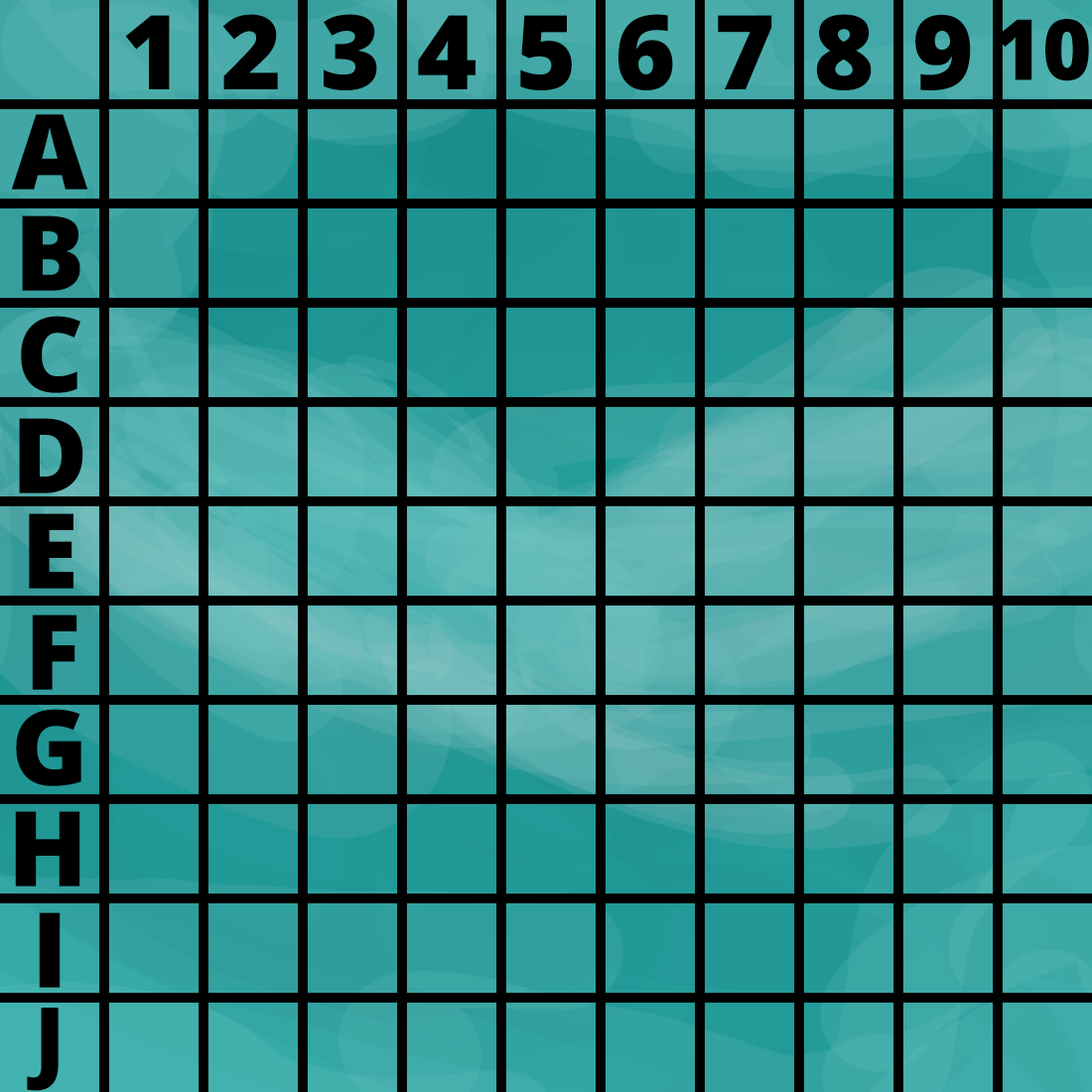
<style>
.page{position:relative;width:1092px;height:1092px}
.page>*{position:absolute;margin:0}
.t1{font:103.2px "OpenSans-ExtraBold";color:#000000}
.t2{font:84.4px "OpenSans-ExtraBold";color:#000000}
.t3{font:104.2px "OpenSans-ExtraBold";color:#000000}
.t4{font:88.4px "OpenSans-ExtraBold";color:#000000}
</style>
<div class="page">
<p class="t1" style="left:125px;top:15px;width:45px;height:74px">1</p>
<p class="t1" style="left:222px;top:14px;width:56px;height:75px">2</p>
<p class="t1" style="left:324px;top:14px;width:53px;height:76px">3</p>
<p class="t1" style="left:418px;top:15px;width:58px;height:74px">4</p>
<p class="t1" style="left:520px;top:15px;width:52px;height:75px">5</p>
<p class="t1" style="left:618px;top:14px;width:55px;height:76px">6</p>
<p class="t1" style="left:718px;top:15px;width:54px;height:74px">7</p>
<p class="t1" style="left:816px;top:14px;width:56px;height:76px">8</p>
<p class="t1" style="left:915px;top:14px;width:56px;height:76px">9</p>
<p class="t2" style="left:996px;top:19px;width:93px;height:62px">10</p>
<p class="t3" style="left:11px;top:114px;width:77px;height:76px">A</p>
<p class="t3" style="left:22px;top:215px;width:58px;height:76px">B</p>
<p class="t3" style="left:21px;top:316px;width:59px;height:77px">C</p>
<p class="t3" style="left:19px;top:418px;width:64px;height:75px">D</p>
<p class="t3" style="left:29px;top:513px;width:44px;height:76px">E</p>
<p class="t3" style="left:32px;top:614px;width:45px;height:76px">F</p>
<p class="t3" style="left:16px;top:709px;width:65px;height:77px">G</p>
<p class="t3" style="left:15px;top:811px;width:65px;height:75px">H</p>
<p class="t3" style="left:39px;top:912px;width:22px;height:76px">I</p>
<p class="t4" style="left:27px;top:1008px;width:32px;height:83px">J</p>
</div>
